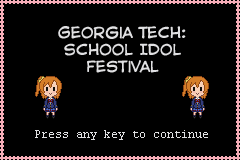
<style>
.page{position:relative;width:240px;height:160px;background:#000000}
.page>*{position:absolute;margin:0}
.t1{font:14px "CCAstroCity";color:#e0e0e2}
.t2{font:12px "CourierNewPSMT";color:#e0e0e2}
</style>
<div class="page">
<p class="t1" style="left:58px;top:26px;width:128px;height:47px;text-align:center">Georgia Tech:<br>School Idol<br>Festival</p>
<p class="t2" style="left:35px;top:130px;width:173px;height:10px">Press any key to continue</p>
</div>
